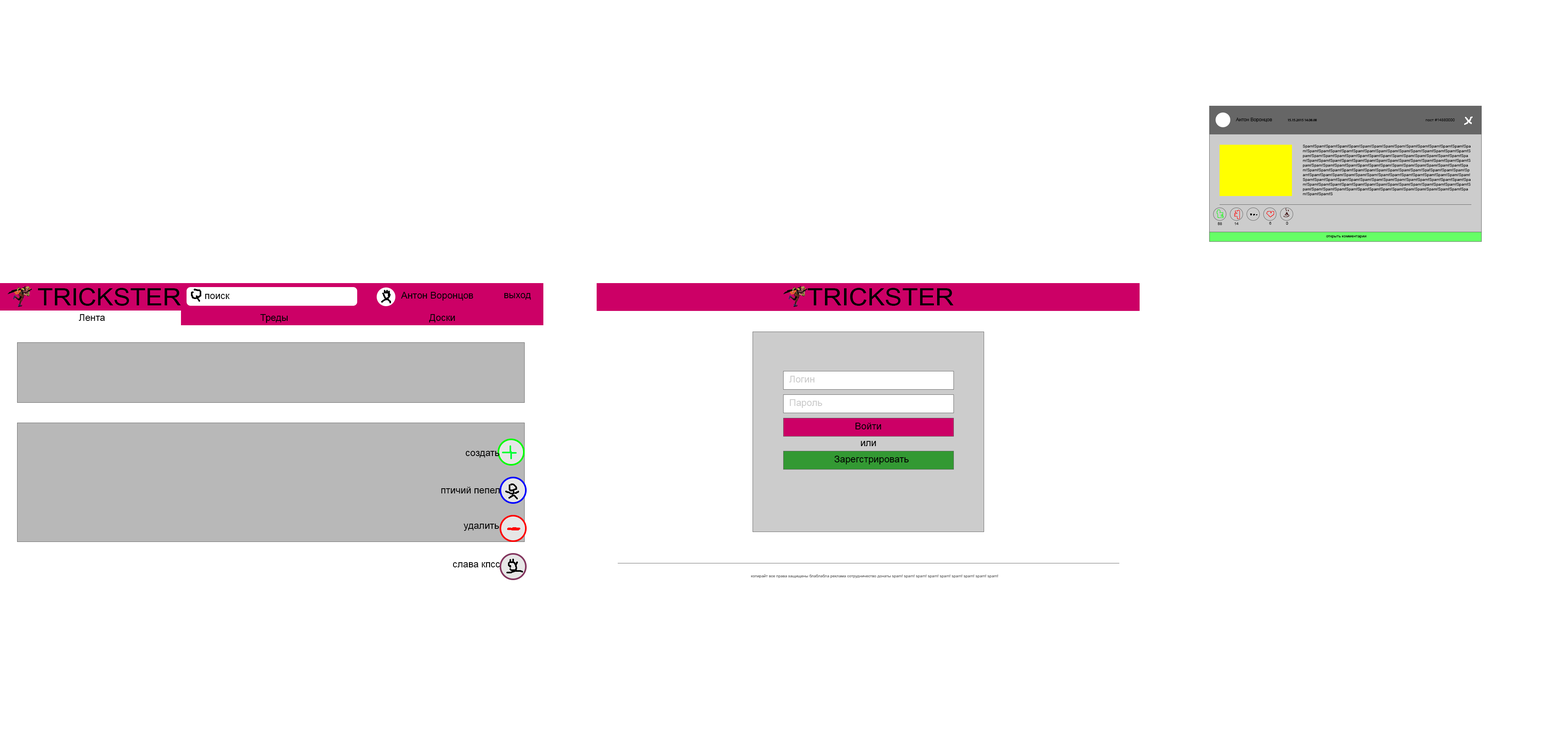
<style>
.page{position:relative;width:1568px;height:730px;background:#ffffff}
.page>*{position:absolute;margin:0}
.t1{font:4.8px "ArialMT";color:#000000}
.t2{font:4px "ArialMT";color:#000000}
.t3{font:23.9px "ArialMT";color:#000000;scale:1.06 1}
.t4{font:9.5px "ArialMT";color:#000000}
.t5{font:23.9px "ArialMT";color:#000000;scale:1.08 1}
.t6{font:9.5px "ArialMT";color:#cccccc}
.t7{font:4px "ArialMT";color:#666666}
</style>
<div class="page">
<p class="t1" style="left:1236px;top:118px;width:36px;height:4px">Антон Воронцов</p>
<p class="t2" style="left:1426px;top:119px;width:29px;height:2px">пост #14880000</p>
<p class="t2" style="left:1303px;top:145px;width:168px;height:51px">Spam!Spam!Spam!Spam!Spam!Spam!Spam!Spam!Spam!Spam!Spam!Spam!Spam!Spam!Spam!Spam!Spam!Spam!Spam!Spam!Spam!Spam!Spam!Spam!Spam!Spam!Spam!Spam!Spam!Spam!Spam!Spam!Spam!Spam!Spam!Spam!Spam!Spam!Spam!Spam!Spam!Spam!Spam!Spam!Spam!Spam!Spam!Spam!Spam!Spam!Spam!Spam!Spam!Spam!Spam!Spam!Spam!Spam!Spam!Spam!Spam!Spam!Spam!Spam!Spam!Spam!Spam!Spam!Spam!Spam!Spam!Spam!Spam!Spam!Spam!Spam!Spam!Spam!Spam!Spam!Spam!Spam!Spam!Spa!Spam!Spam!Spam!Spam!Spam!Spam!Spam!Spam!Spam!Spam!Spam!Spam!Spam!Spam!Spam!Spam!Spam!Spam!Spam!Spam!Spam!Spam!Spam!Spam!Spam!Spam!Spam!Spam!Spam!Spam!Spam!Spam!Spam!Spam!Spam!Spam!Spam!Spam!Spam!Spam!Spam!Spam!Spam!Spam!Spam!Spam!Spam!Spam!Spam!Spam!Spam!Spam!Spam!Spam!Spam!Spam!Spam!Spam!Spam!Spam!Spam!Spam!Spam!Spam!S</p>
<p class="t2" style="left:1269px;top:222px;width:2px;height:3px">6</p>
<p class="t2" style="left:1286px;top:222px;width:2px;height:3px">0</p>
<p class="t2" style="left:1218px;top:222px;width:4px;height:3px">88</p>
<p class="t2" style="left:1234px;top:222px;width:5px;height:3px">14</p>
<p class="t2" style="left:1326px;top:235px;width:40px;height:3px">открыть комментарии</p>
<p class="t3" style="left:38px;top:288px;width:143px;height:18px">TRICKSTER</p>
<p class="t4" style="left:205px;top:294px;width:25px;height:5px">поиск</p>
<p class="t4" style="left:401px;top:292px;width:72px;height:9px">Антон Воронцов</p>
<p class="t4" style="left:504px;top:293px;width:27px;height:7px">выход</p>
<p class="t5" style="left:807px;top:288px;width:146px;height:18px">TRICKSTER</p>
<p class="t4" style="left:79px;top:314px;width:26px;height:7px">Лента</p>
<p class="t4" style="left:260px;top:314px;width:28px;height:9px">Треды</p>
<p class="t4" style="left:429px;top:314px;width:26px;height:9px">Доски</p>
<p class="t6" style="left:789px;top:376px;width:26px;height:7px">Логин</p>
<p class="t6" style="left:790px;top:399px;width:32px;height:9px">Пароль</p>
<p class="t4" style="left:855px;top:423px;width:26px;height:7px">Войти</p>
<p class="t4" style="left:861px;top:441px;width:15px;height:5px">или</p>
<p class="t4" style="left:465px;top:451px;width:35px;height:7px">создать</p>
<p class="t4" style="left:835px;top:456px;width:74px;height:9px">Зарегстрировать</p>
<p class="t4" style="left:441px;top:487px;width:59px;height:7px">птичий пепел</p>
<p class="t4" style="left:463px;top:524px;width:36px;height:7px">удалить</p>
<p class="t4" style="left:453px;top:562px;width:47px;height:6px">слава кпсс</p>
<p class="t7" style="left:751px;top:574px;width:247px;height:4px">копирайт все права защищены блаблабла реклама сотрудничество донаты spam! spam! spam! spam! spam! spam! spam! spam! spam!</p>
</div>
